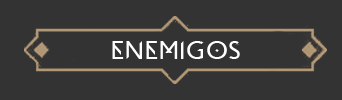
<style>
.page{position:relative;width:342px;height:100px;background:#333333}
.page>*{position:absolute;margin:0}
.t1{font:24px "Berserker-Regular";color:#ffffff}
</style>
<div class="page">
<p class="t1" style="left:112px;top:41px;width:128px;height:18px">ENEMIGOS</p>
</div>
